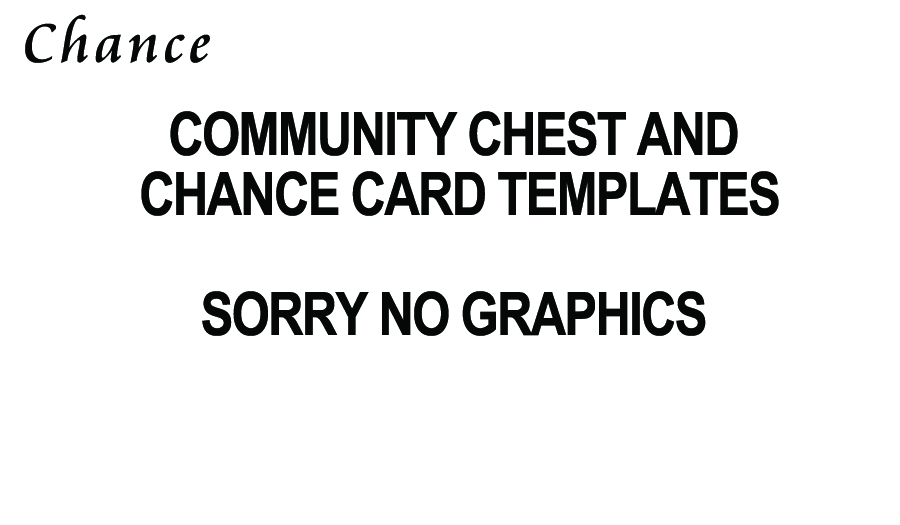
<style>
.page{position:relative;width:900px;height:525px;background:#ffffff}
.page>*{position:absolute;margin:0}
.t1{font:60px "CataneoBT-Regular";letter-spacing:0.075em;color:#060808}
.t2{font:60px/60px "ArialNarrow-Bold";letter-spacing:-0.03em;color:#060808;text-transform:uppercase}
</style>
<div class="page">
<p class="t1" style="left:25px;top:14px;width:185px;height:49px">Chance</p>
<p class="t2" style="left:141px;top:111px;width:638px;height:225px;text-align:center">Community Chest and <br>Chance Card Templates<br><br>Sorry no graphics</p>
</div>
